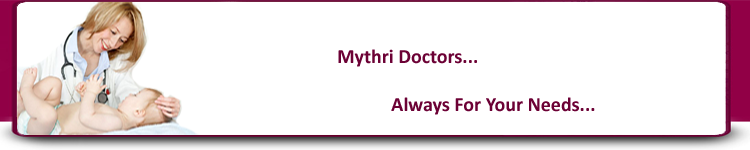
<style>
.page{position:relative;width:750px;height:150px;background:#ffffff}
.page>*{position:absolute;margin:0}
.t1{font:20px "Calibri-Bold";color:#6c0135}
</style>
<div class="page">
<p class="t1" style="left:338px;top:49px;width:257px;height:66px">Mythri Doctors...<br><br>            Always For Your Needs...</p>
</div>
